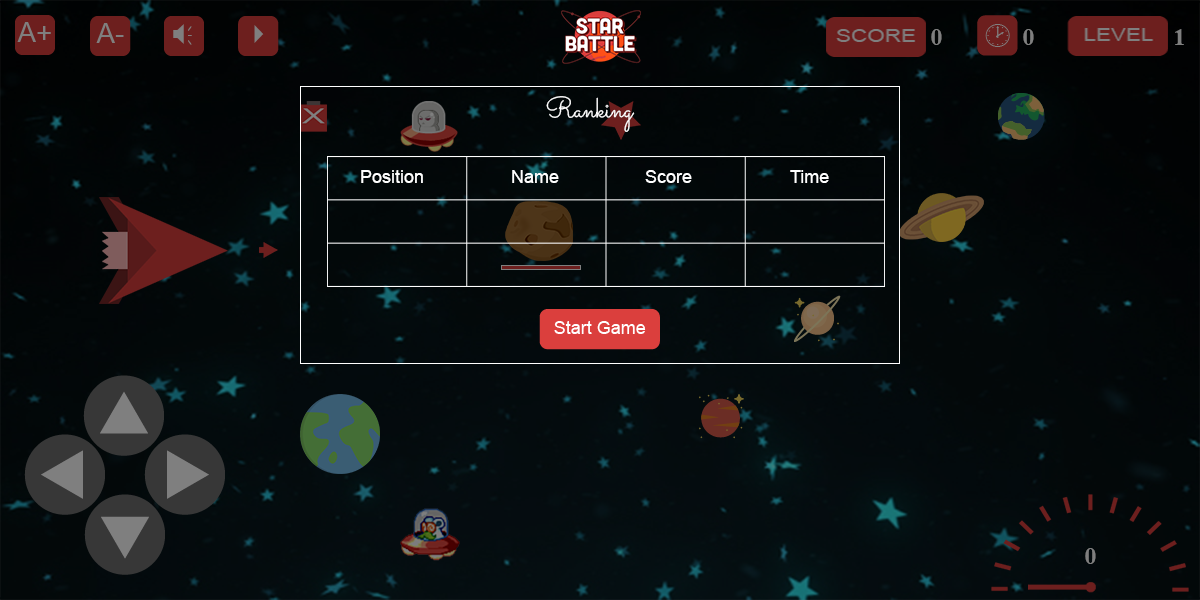
<style>
.page{position:relative;width:1200px;height:600px}
.page>*{position:absolute;margin:0}
.t1{font:24px "TimesNewRomanPS-BoldMT";color:#7f7f7f}
.t2{font:28px "Sacramento-Regular";color:#ffffff}
.t3{font:18px "ArialMT";color:#ffffff}
</style>
<div class="page">
<p class="t1" style="left:931px;top:29px;width:11px;height:16px">0</p>
<p class="t1" style="left:1023px;top:29px;width:11px;height:16px">0</p>
<p class="t1" style="left:1175px;top:29px;width:9px;height:16px">1</p>
<p class="t2" style="left:546px;top:96px;width:89px;height:36px">Ranking</p>
<p class="t3" style="left:361px;top:170px;width:62px;height:13px">Position</p>
<p class="t3" style="left:512px;top:170px;width:47px;height:13px">Name</p>
<p class="t3" style="left:645px;top:170px;width:47px;height:13px">Score</p>
<p class="t3" style="left:790px;top:170px;width:39px;height:13px">Time</p>
<p class="t1" style="left:1085px;top:548px;width:11px;height:16px">0</p>
</div>
